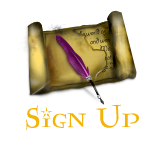
<style>
.page{position:relative;width:150px;height:150px;background:#ffffff}
.page>*{position:absolute;margin:0}
.t1{font:30px "Lumos";color:#f4b407}
</style>
<div class="page">
<p class="t1" style="left:26px;top:104px;width:113px;height:26px">Sign Up</p>
</div>
